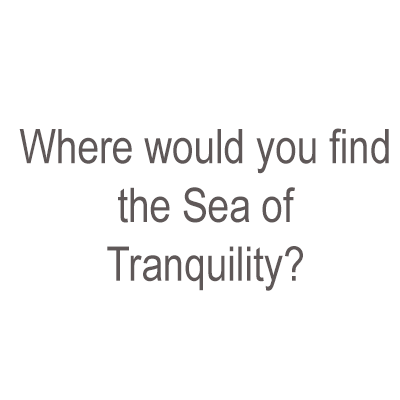
<style>
.page{position:relative;width:400px;height:400px;background:#ffffff}
.page>*{position:absolute;margin:0}
.t1{font:48px/58.9px "ArialNarrow";color:#5f5858}
</style>
<div class="page">
<p class="t1" style="left:19px;top:128px;width:370px;height:163px;text-align:center">Where would you find the Sea of Tranquility?</p>
</div>
